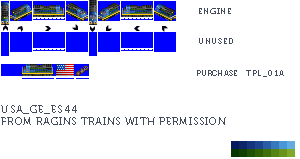
<style>
.page{position:relative;width:300px;height:159px;background:#ffffff}
.page>*{position:absolute;margin:0}
.t1{font:8px "Museo700-Regular";letter-spacing:0.075em;color:#444c5c;text-transform:uppercase}
.t2{font:8px "Museo700-Regular";color:#444c5c;text-transform:uppercase}
.t3{font:8px "Museo700-Regular";letter-spacing:0.1em;color:#444c5c;text-transform:uppercase}
.t4{font:10px "Museo700-Regular";letter-spacing:0.075em;color:#444c5c;text-transform:uppercase}
</style>
<div class="page">
<p class="t1" style="left:199px;top:8px;width:32px;height:6px">Engine</p>
<p class="t1" style="left:199px;top:38px;width:34px;height:6px">Unused</p>
<p class="t2" style="left:197px;top:70px;width:40px;height:6px">Purchase</p>
<p class="t3" style="left:246px;top:70px;width:38px;height:7px">tpl_01a</p>
<p class="t4" style="left:1px;top:105px;width:225px;height:20px">USA_GE_ES44<br>from ragins trains with permission</p>
</div>
